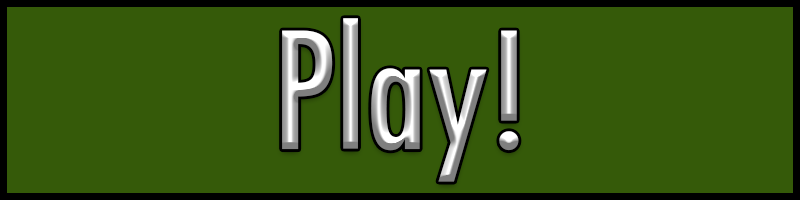
<style>
.page{position:relative;width:800px;height:200px;background:#355a09}
.page>*{position:absolute;margin:0}
.t1{font:157px "Futura-CondensedMedium"}
</style>
<div class="page">
<p class="t1" style="left:282px;top:18px;width:237px;height:164px">Play!</p>
</div>
